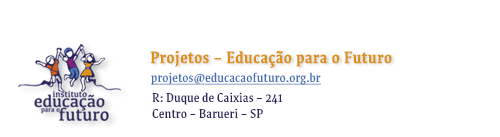
<style>
.page{position:relative;width:500px;height:137px;background:#ffffff}
.page>*{position:absolute;margin:0}
.t1{font:18px "Destra-Medium-TTF-Trial";color:#dc911b;font-weight:bold}
.t2{font:14px "Destra-Medium-TTF-Trial";color:#4470b4;text-decoration:underline}
.t3{font:14px/16px "Destra-Medium-TTF-Trial";color:#2b275b}
</style>
<div class="page">
<p class="t1" style="left:150px;top:51px;width:242px;height:17px">Projetos - Educação para o Futuro</p>
<p class="t2" style="left:151px;top:72px;width:170px;height:13px">projetos@educacaofuturo.org.br</p>
<p class="t3" style="left:152px;top:92px;width:131px;height:26px">R: Duque de Caixias - 241<br>Centro - Barueri - SP</p>
</div>
